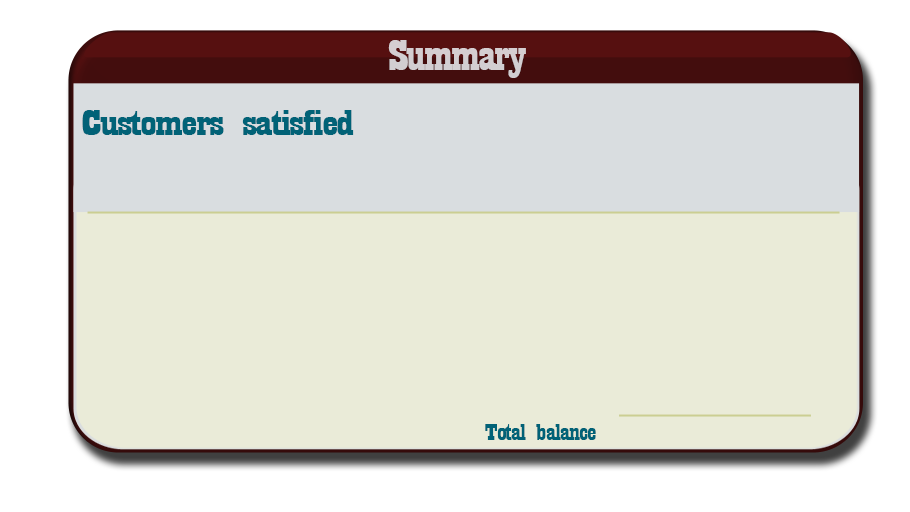
<style>
.page{position:relative;width:910px;height:512px;background:#eaebd8}
.page>*{position:absolute;margin:0}
.t1{font:44.6px "Playbill";letter-spacing:-0.025em;color:#d2ced1;scale:1.61 1}
.t2{font:36.7px "Playbill";letter-spacing:-0.025em;color:#016277;scale:1.88 1}
.t3{font:23.8px "Playbill";letter-spacing:-0.025em;color:#016277;scale:1.69 1}
</style>
<div class="page">
<p class="t1" style="left:388px;top:40px;width:138px;height:38px">Summary</p>
<p class="t2" style="left:82px;top:110px;width:272px;height:25px">Customers satisfied</p>
<p class="t3" style="left:485px;top:424px;width:111px;height:16px">Total balance</p>
</div>
